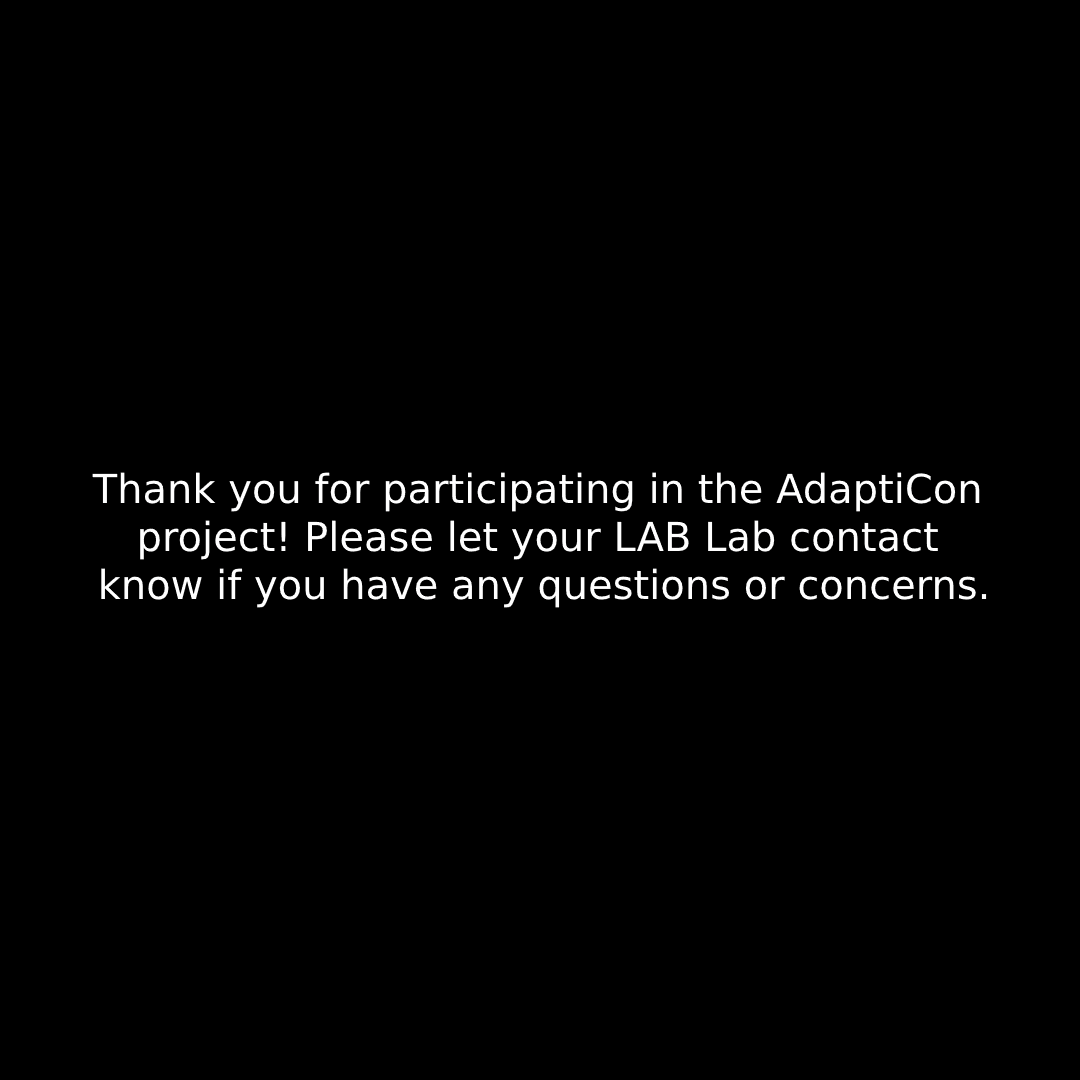
<style>
.page{position:relative;width:1080px;height:1080px;background:#000000}
.page>*{position:absolute;margin:0}
.t1{font:40px "DejaVuSans";color:#ffffff}
</style>
<div class="page">
<p class="t1" style="left:92px;top:472px;width:895px;height:136px;text-align:center">Thank you for participating in the AdaptiCon <br>project! Please let your LAB Lab contact <br>know if you have any questions or concerns.</p>
</div>
